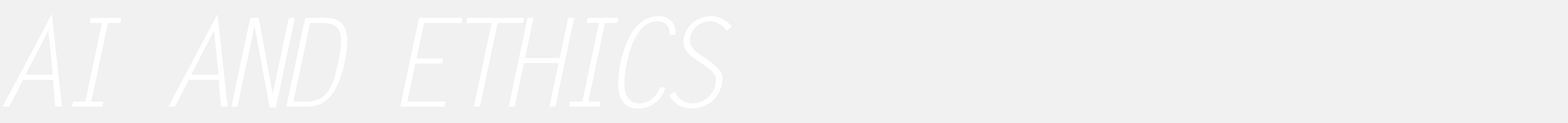
<style>
.page{position:relative;width:1568px;height:123px;background:#f1f1f1}
.page>*{position:absolute;margin:0}
.t1{font:122.7px "LetterGothicStd-Slanted";letter-spacing:-0.15em;color:#ffffff}
</style>
<div class="page">
<p class="t1" style="left:3px;top:14px;width:729px;height:94px">AI AND ETHICS</p>
</div>
